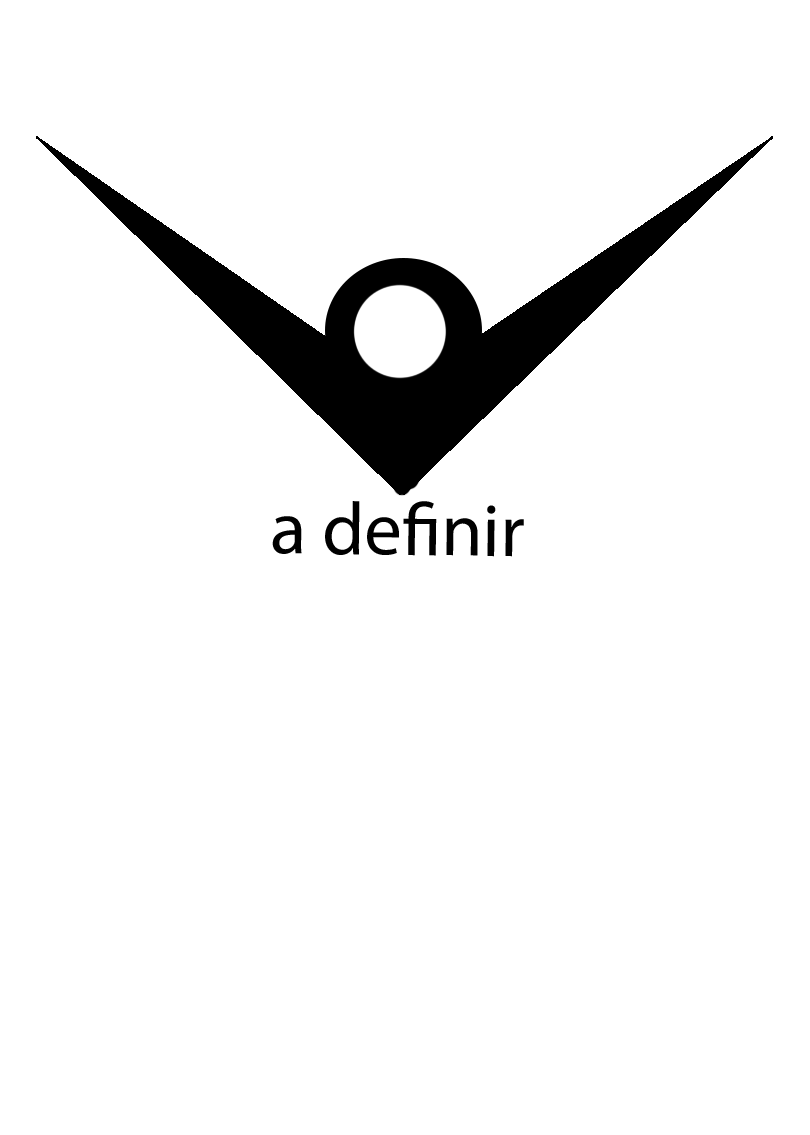
<style>
.page{position:relative;width:810px;height:1135px;background:#ffffff}
.page>*{position:absolute;margin:0}
.t1{font:75px "MyriadPro-Regular";color:#000000}
</style>
<div class="page">
<p class="t1" style="left:272px;top:501px;width:252px;height:56px;rotate:1deg">a definir</p>
</div>
